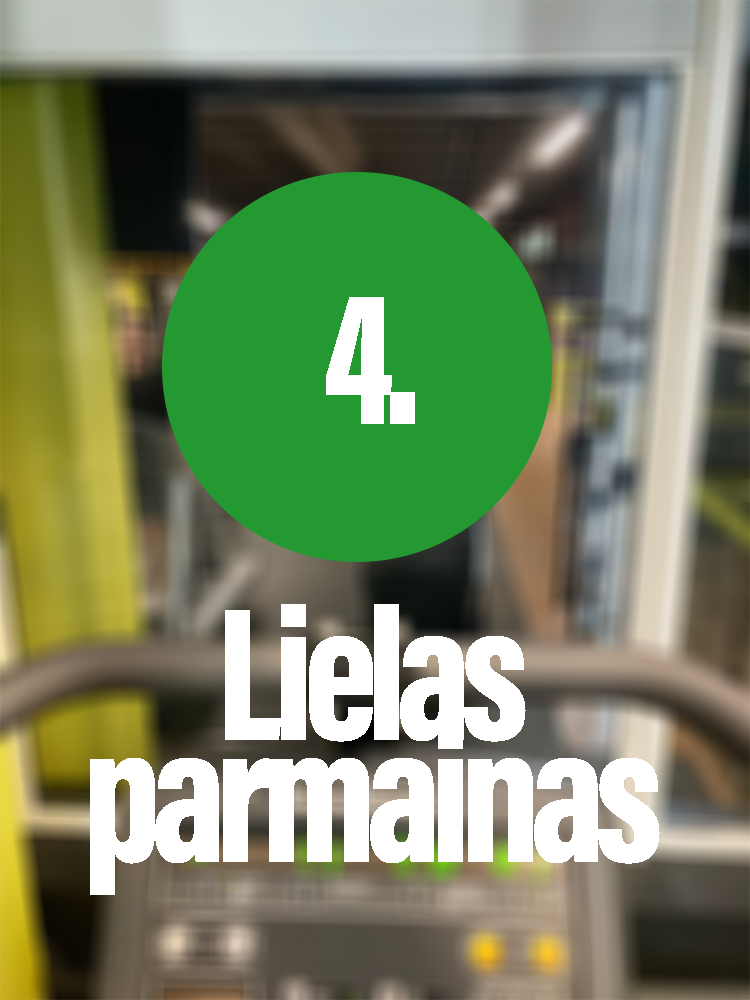
<style>
.page{position:relative;width:750px;height:1000px}
.page>*{position:absolute;margin:0}
.t1{font:195.3px "AcuminConcept-ExtraCondensedBlack";letter-spacing:-0.05em;color:#ffffff}
.t2{font:195.3px/61px "AcuminConcept-ExtraCondensedBlack";letter-spacing:-0.05em;color:#ffffff}
</style>
<div class="page">
<p class="t1" style="left:326px;top:297px;width:89px;height:127px">4.</p>
<p class="t2" style="left:90px;top:604px;width:570px;height:291px;text-align:center">Lielas<br><br>parmainas</p>
</div>
